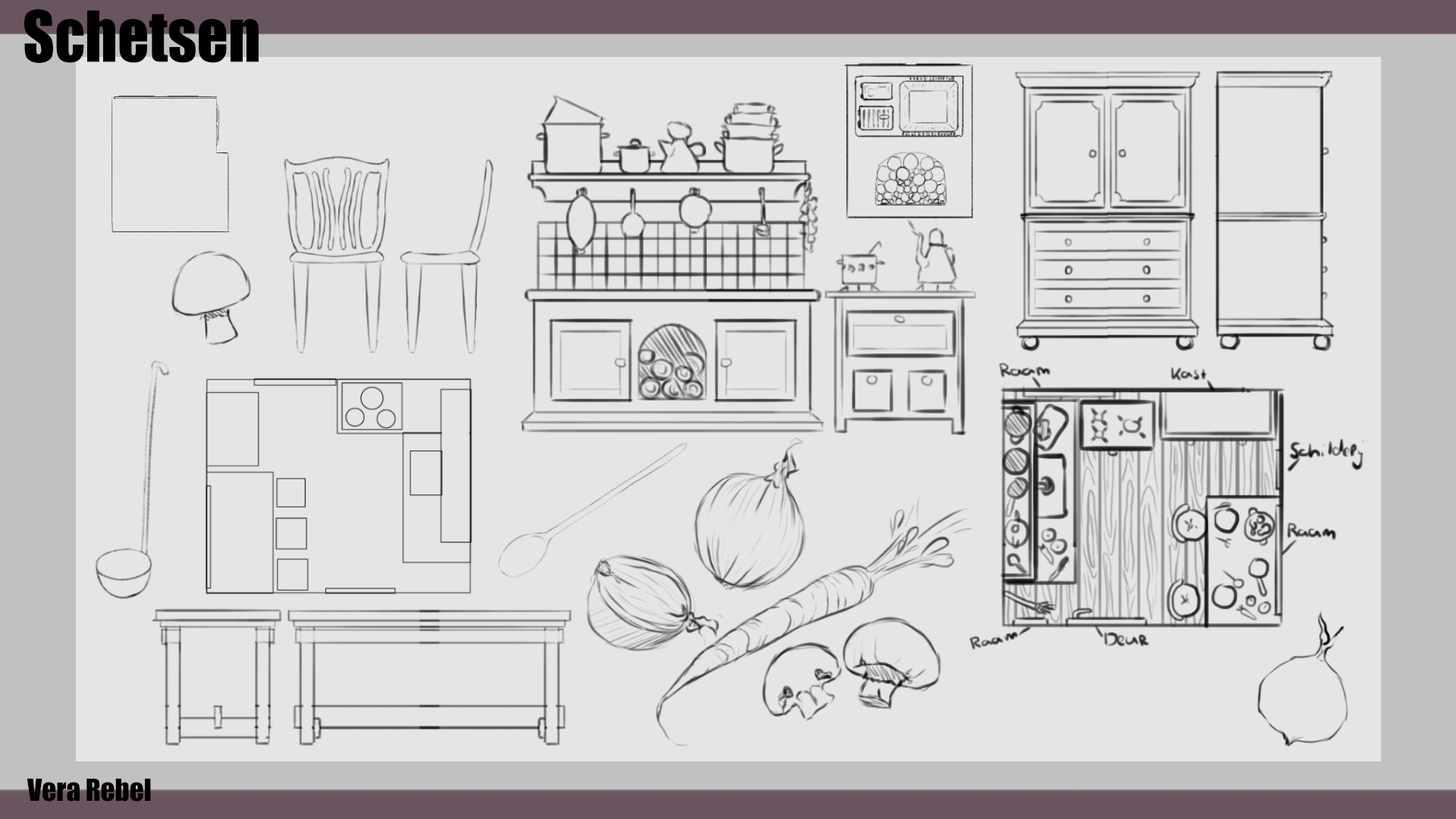
<style>
.page{position:relative;width:1456px;height:819px;background:#e5e5e5}
.page>*{position:absolute;margin:0}
.t1{font:65.1px "Impact";color:#000000;scale:0.95 1}
.t2{font:28.1px "Impact";color:#000000}
</style>
<div class="page">
<p class="t1" style="left:24px;top:9px;width:235px;height:54px">Schetsen</p>
<p class="t2" style="left:27px;top:778px;width:124px;height:24px">Vera Rebel</p>
</div>
